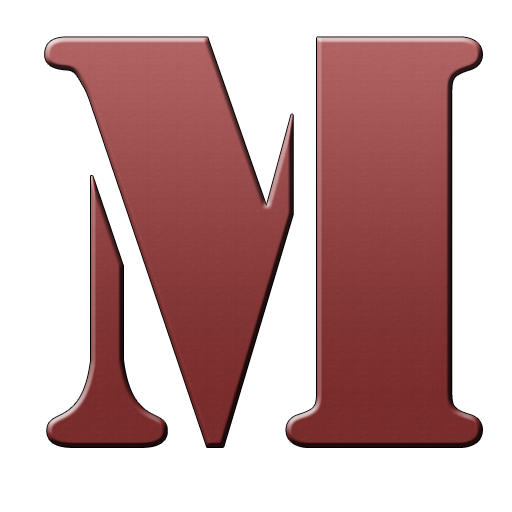
<style>
.page{position:relative;width:512px;height:512px;background:#ffffff}
.page>*{position:absolute;margin:0}
.t1{font:547px "StencilStd";letter-spacing:0.374em}
</style>
<div class="page">
<p class="t1" style="left:45px;top:37px;width:437px;height:410px">M</p>
</div>
